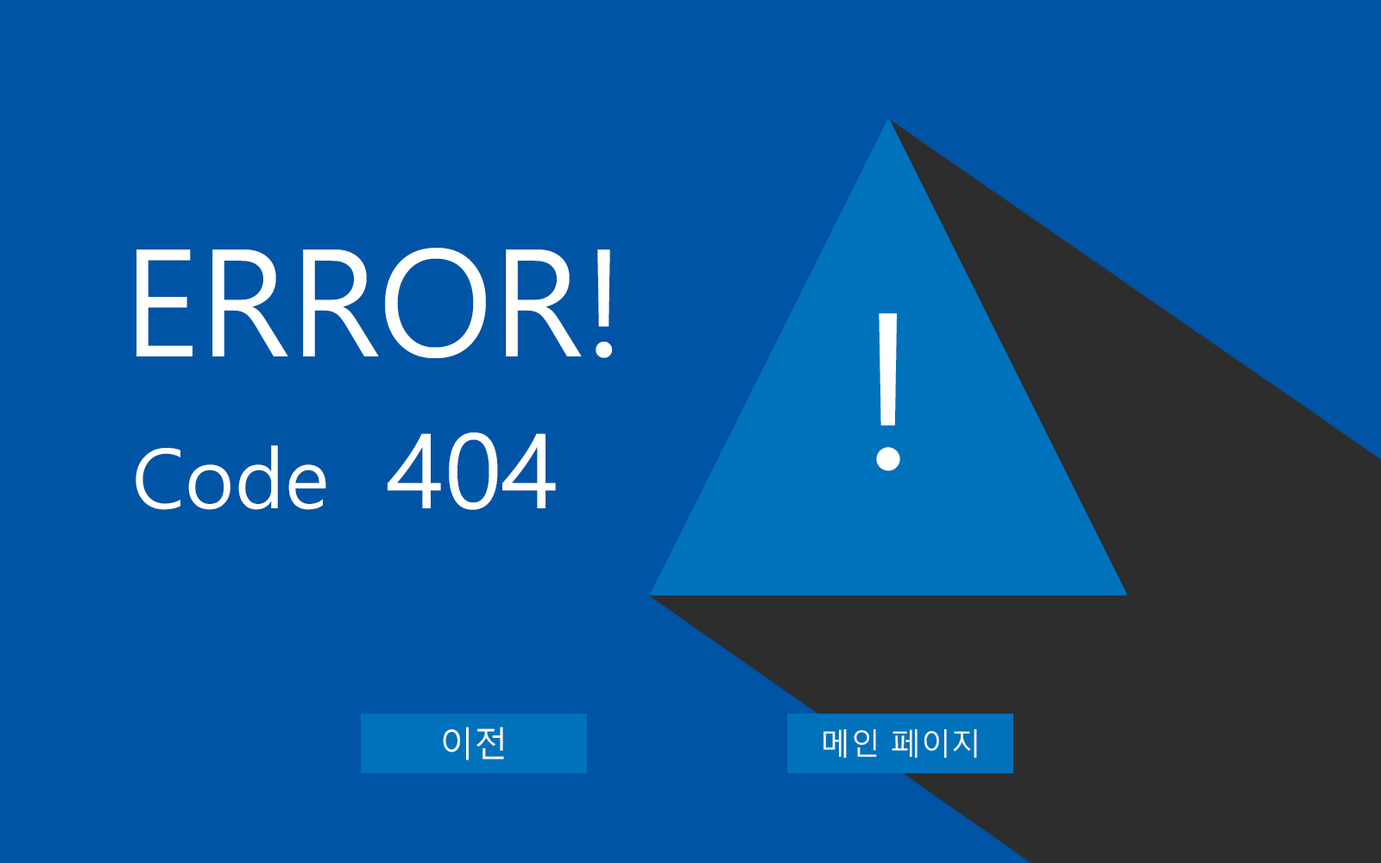
<style>
.page{position:relative;width:1381px;height:863px;background:#0054a6}
.page>*{position:absolute;margin:0}
.t1{font:148.6px "MalgunGothic";color:#ffffff}
.t2{font:215.8px "MalgunGothic";color:#ffffff}
.t3{font:82.7px "MalgunGothic";color:#ffffff}
.t4{font:103.6px "MalgunGothic";color:#ffffff}
.t5{font:34.5px "MalgunGothic";color:#ffffff}
.t6{font:30.2px "MalgunGothic";color:#ffffff}
</style>
<div class="page">
<p class="t1" style="left:136px;top:248px;width:476px;height:110px">ERROR!</p>
<p class="t2" style="left:876px;top:313px;width:24px;height:158px">!</p>
<p class="t3" style="left:136px;top:433px;width:420px;height:77px">Code  <span class="t4">404</span></p>
<p class="t5" style="left:443px;top:727px;width:61px;height:34px">이전</p>
<p class="t6" style="left:824px;top:729px;width:153px;height:29px">메인 페이지</p>
</div>
